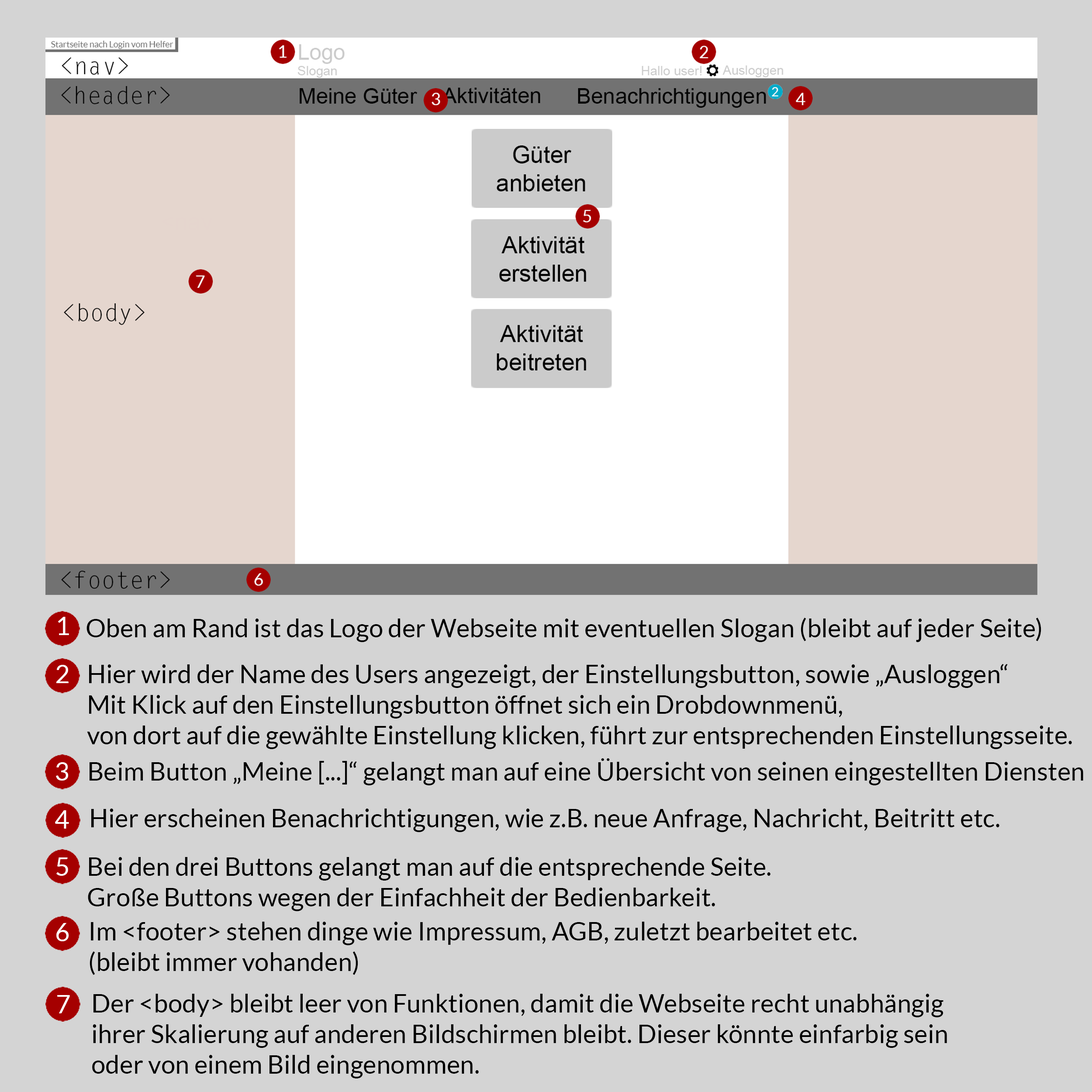
<style>
.page{position:relative;width:1092px;height:1092px;background:#d4d4d4}
.page>*{position:absolute;margin:0}
.t1{font:25.5px "Lato-Regular";color:#ffffff}
.t2{font:25.5px "Lato-Regular";color:#000000}
</style>
<div class="page">
<p class="t1" style="left:58px;top:617px;width:11px;height:18px">1</p>
<p class="t2" style="left:86px;top:618px;width:955px;height:24px">Oben am Rand ist das Logo der Webseite mit eventuellen Slogan (bleibt auf jeder Seite)</p>
<p class="t1" style="left:56px;top:665px;width:13px;height:18px">2</p>
<p class="t2" style="left:87px;top:664px;width:985px;height:85px">Hier wird der Name des Users angezeigt, der Einstellungsbutton, sowie „Ausloggen“<br>Mit Klick auf den Einstellungsbutton öffnet sich ein Drobdownmenü, <br>von dort auf die gewählte Einstellung klicken, führt zur entsprechenden Einstellungsseite.</p>
<p class="t2" style="left:90px;top:758px;width:993px;height:27px">Beim Button „Meine [...]“ gelangt man auf eine Übersicht von seinen eingestellten Diensten</p>
<p class="t1" style="left:56px;top:762px;width:13px;height:19px">3</p>
<p class="t2" style="left:91px;top:809px;width:908px;height:23px">Hier erscheinen Benachrichtigungen, wie z.B. neue Anfrage, Nachricht, Beitritt etc.</p>
<p class="t1" style="left:55px;top:810px;width:14px;height:19px">4</p>
<p class="t1" style="left:56px;top:857px;width:12px;height:19px">5</p>
<p class="t2" style="left:88px;top:857px;width:683px;height:54px">Bei den drei Buttons gelangt man auf die entsprechende Seite. <br>Große Buttons wegen der Einfachheit der Bedienbarkeit.</p>
<p class="t1" style="left:56px;top:923px;width:13px;height:18px">6</p>
<p class="t2" style="left:90px;top:922px;width:767px;height:53px">Im &lt;footer&gt; stehen dinge wie Impressum, AGB, zuletzt bearbeitet etc. <br>(bleibt immer vohanden)</p>
<p class="t1" style="left:57px;top:995px;width:13px;height:18px">7</p>
<p class="t2" style="left:92px;top:994px;width:855px;height:84px">Der &lt;body&gt; bleibt leer von Funktionen, damit die Webseite recht unabhängig <br>ihrer Skalierung auf anderen Bildschirmen bleibt. Dieser könnte einfarbig sein<br>oder von einem Bild eingenommen.</p>
</div>
